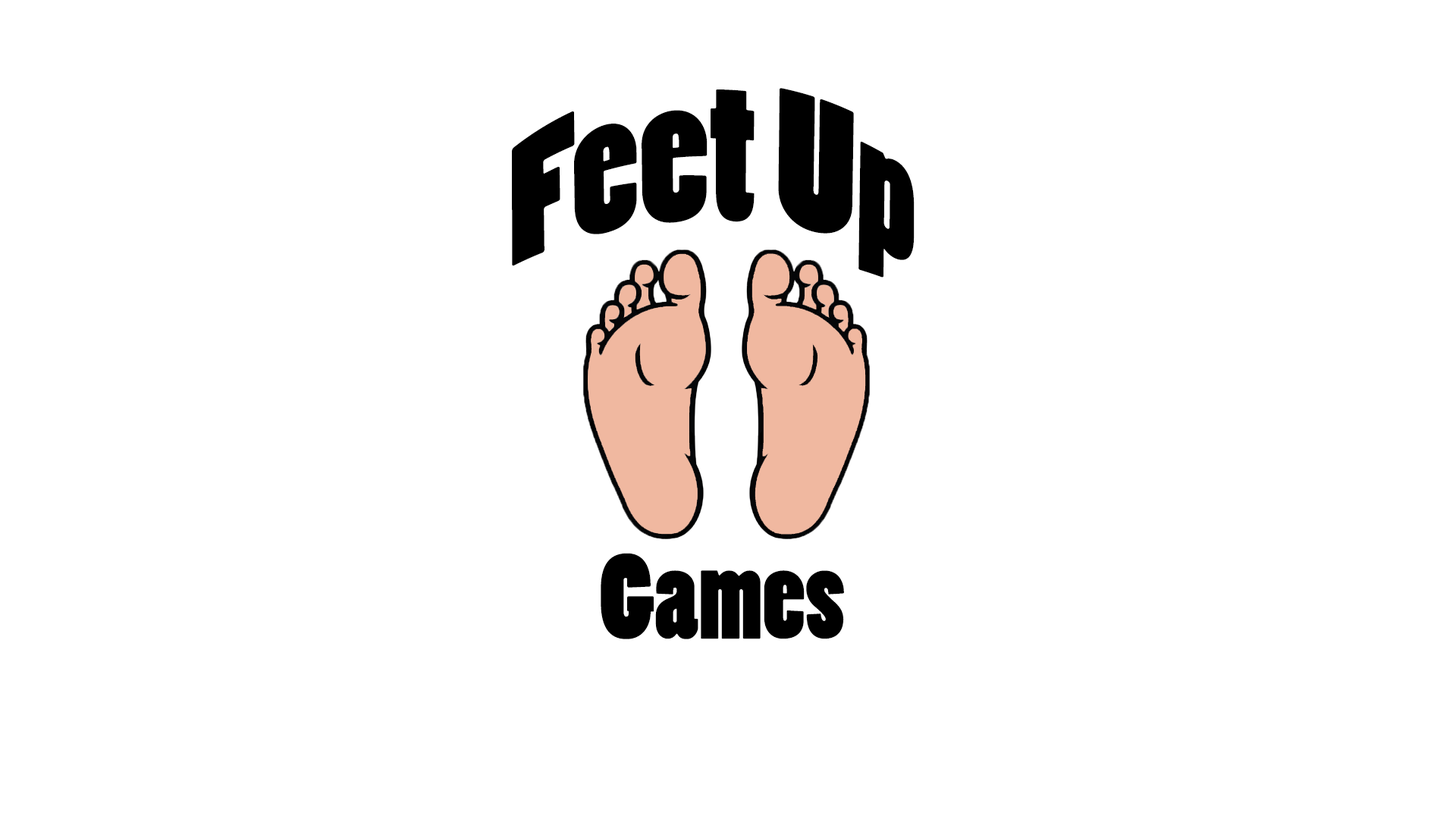
<style>
.page{position:relative;width:1456px;height:819px;background:#ffffff}
.page>*{position:absolute;margin:0}
.t1{font:155.5px "PoplarStd";color:#000000;scale:1.13 1}
.t2{font:113.4px "PoplarStd";color:#000000}
</style>
<div class="page">
<p class="t1" style="left:512px;top:88px;width:403px;height:190px">Feet Up</p>
<p class="t2" style="left:601px;top:553px;width:243px;height:86px">Games</p>
</div>
